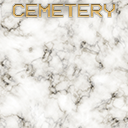
<style>
.page{position:relative;width:128px;height:128px}
.page>*{position:absolute;margin:0}
.t1{font:19.2px "VCROSDMono";letter-spacing:0.01em;scale:1.13 1}
</style>
<div class="page">
<p class="t1" style="left:13px;top:4px;width:102px;height:13px">CEMETERY</p>
</div>
